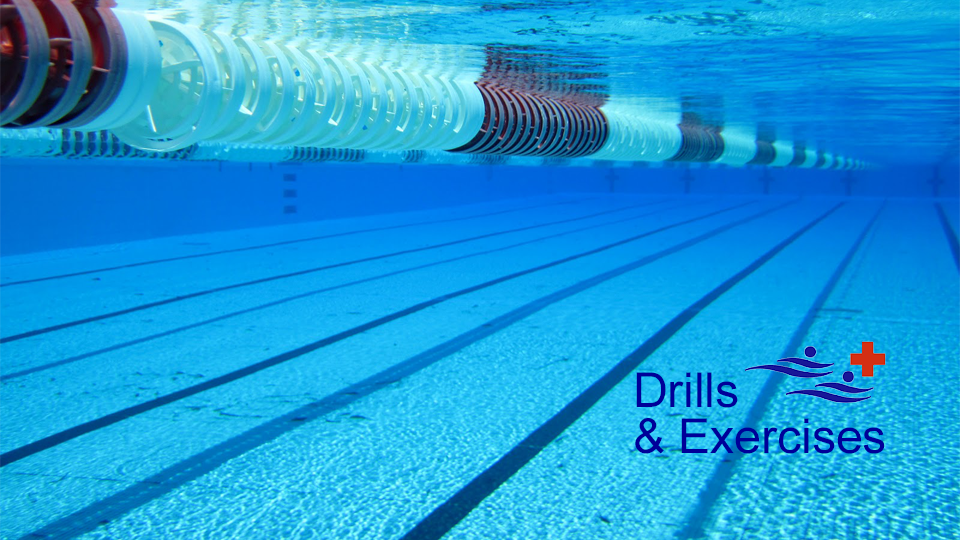
<style>
.page{position:relative;width:960px;height:540px}
.page>*{position:absolute;margin:0}
.t1{font:48px "ArialMT";color:#000099}
</style>
<div class="page">
<p class="t1" style="left:636px;top:372px;width:102px;height:36px">Drills</p>
<p class="t1" style="left:635px;top:418px;width:250px;height:36px">&amp; Exercises</p>
</div>
